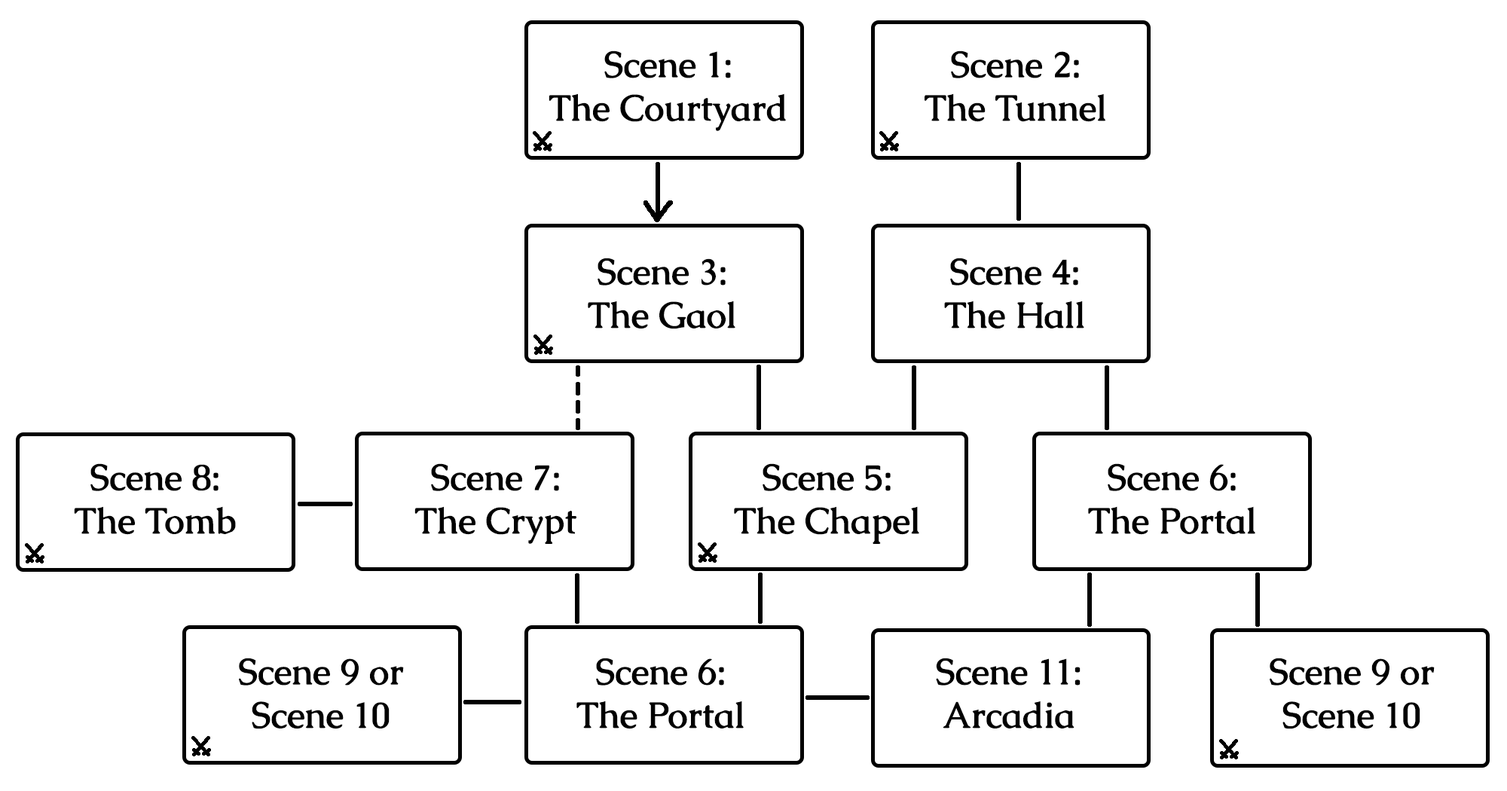
<style>
.page{position:relative;width:1507px;height:791px;background:#ffffff}
.page>*{position:absolute;margin:0}
.t1{font:36.2px "Caudex-Bold";color:#000000}
</style>
<div class="page">
<p class="t1" style="left:549px;top:50px;width:237px;height:81px;text-align:center">Scene 1:<br>The Courtyard</p>
<p class="t1" style="left:925px;top:50px;width:181px;height:72px;text-align:center">Scene 2:<br>The Tunnel</p>
<p class="t1" style="left:588px;top:258px;width:147px;height:71px;text-align:center">Scene 3:<br>The Gaol</p>
<p class="t1" style="left:944px;top:258px;width:140px;height:71px;text-align:center">Scene 4:<br>The Hall</p>
<p class="t1" style="left:74px;top:463px;width:162px;height:72px;text-align:center">Scene 8:<br>The Tomb</p>
<p class="t1" style="left:414px;top:463px;width:162px;height:81px;text-align:center">Scene 7:<br>The Crypt</p>
<p class="t1" style="left:734px;top:463px;width:185px;height:81px;text-align:center">Scene 5:<br>The Chapel</p>
<p class="t1" style="left:1088px;top:463px;width:167px;height:72px;text-align:center">Scene 6:<br>The Portal</p>
<p class="t1" style="left:239px;top:658px;width:165px;height:71px;text-align:center">Scene 9 or<br>Scene 10</p>
<p class="t1" style="left:576px;top:658px;width:168px;height:71px;text-align:center">Scene 6:<br>The Portal</p>
<p class="t1" style="left:936px;top:658px;width:145px;height:71px;text-align:center">Scene 11:<br>Arcadia</p>
<p class="t1" style="left:1270px;top:658px;width:165px;height:71px;text-align:center">Scene 9 or<br>Scene 10</p>
</div>
